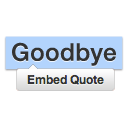
<style>
.page{position:relative;width:128px;height:128px;background:#ffffff}
.page>*{position:absolute;margin:0}
.t1{font:24.3px "HelveticaNeue-Medium";letter-spacing:0.025em;color:#333333}
</style>
<div class="page">
<p class="t1" style="left:12px;top:42px;width:104px;height:24px">Goodbye</p>
</div>
